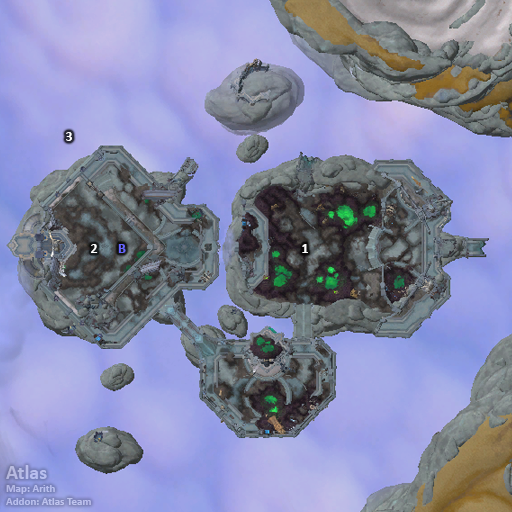
<style>
.page{position:relative;width:512px;height:512px}
.page>*{position:absolute;margin:0}
.t1{font:14px "Calibri-Bold";color:#ffffff}
.t2{font:14px "Calibri-Bold";color:#6666ff}
.t3{font:11px "Calibri-Bold";color:#b8beee}
.t4{font:20px "Calibri-Bold";color:#b8beee}
</style>
<div class="page">
<p class="t1" style="left:66px;top:132px;width:6px;height:9px">3</p>
<p class="t1" style="left:91px;top:244px;width:7px;height:9px">2</p>
<p class="t2" style="left:118px;top:244px;width:8px;height:9px">B</p>
<p class="t1" style="left:302px;top:244px;width:6px;height:9px">1</p>
<p class="t3" style="left:6px;top:465px;width:85px;height:40px"><span class="t4">Atlas<br></span>Map: Arith<br>Addon: Atlas Team</p>
</div>
